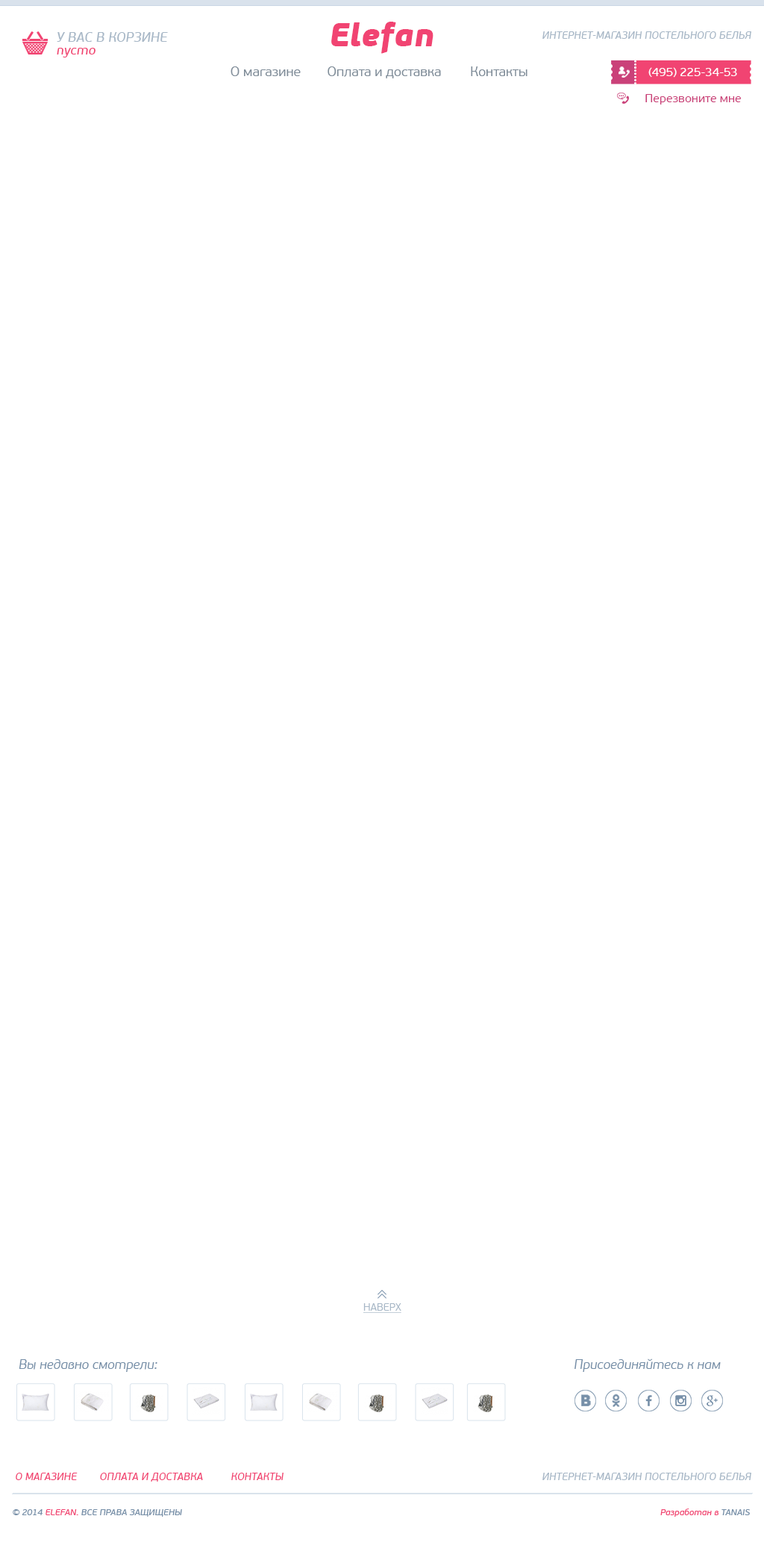
<style>
.page{position:relative;width:764px;height:1560px;background:#ffffff}
.page>*{position:absolute;margin:0}
.t1{font:32.5px "PFBeauSansPro-BlackItalic";color:#f14472}
.t2{font:13.3px "PFBeauSansPro-BbookItalic";color:#a8b8c7;text-transform:uppercase}
.t3{font:10.3px "PFBeauSansPro-BbookItalic";color:#a8b8c7;text-transform:uppercase}
.t4{font:13.3px "PFBeauSansPro-BbookItalic";color:#f14472}
.t5{font:13.3px "PFBeauSansPro-Light";color:#7f8c98}
.t6{font:11.8px "PFBeauSansPro-Regular";color:#ffffff}
.t7{font:11.8px "PFBeauSansPro-Regular";color:#ca4179}
.t8{font:10.3px "PFBeauSansPro-Light";color:#a8b8c7;text-transform:uppercase;text-decoration:underline}
.t9{font:13.3px "PFBeauSansPro-LightItalic";color:#768fa8}
.t10{font:10.3px "PFBeauSansPro-BbookItalic";color:#f14472;text-transform:uppercase}
.t11{font:8.9px "PFBeauSansPro-BbookItalic";color:#768fa8}
.t12{font:8.9px "PFBeauSansPro-BbookItalic";color:#f14472;text-transform:uppercase}
.t13{font:8.9px "PFBeauSansPro-BbookItalic";color:#f14472}
</style>
<div class="page">
<p class="t1" style="left:331px;top:22px;width:103px;height:32px">Elefan</p>
<p class="t2" style="left:57px;top:32px;width:111px;height:10px">У ВАС В КОРЗИНЕ</p>
<p class="t3" style="left:543px;top:31px;width:209px;height:8px">Интернет-магазин постельного белья</p>
<p class="t4" style="left:57px;top:48px;width:39px;height:9px">пусто</p>
<p class="t5" style="left:231px;top:66px;width:70px;height:10px">О магазине</p>
<p class="t5" style="left:328px;top:66px;width:113px;height:12px">Оплата и доставка</p>
<p class="t5" style="left:471px;top:66px;width:57px;height:10px">Контакты</p>
<p class="t6" style="left:649px;top:67px;width:88px;height:11px">(495) 225-34-53</p>
<p class="t7" style="left:646px;top:94px;width:95px;height:11px">Перезвоните мне</p>
<p class="t8" style="left:363px;top:1303px;width:39px;height:10px">наверх</p>
<p class="t9" style="left:19px;top:1359px;width:138px;height:13px">Вы недавно смотрели:</p>
<p class="t9" style="left:575px;top:1359px;width:146px;height:13px">Присоединяйтесь к нам</p>
<p class="t10" style="left:16px;top:1473px;width:62px;height:7px">О магазине</p>
<p class="t10" style="left:100px;top:1473px;width:103px;height:9px">Оплата и доставка</p>
<p class="t10" style="left:231px;top:1473px;width:53px;height:7px">Контакты</p>
<p class="t3" style="left:543px;top:1473px;width:209px;height:7px">Интернет-магазин постельного белья</p>
<p class="t11" style="left:13px;top:1509px;width:169px;height:8px">© 2014 <span class="t12">elefan. </span>ВСЕ ПРАВА ЗАЩИЩЕНЫ</p>
<p class="t13" style="left:661px;top:1509px;width:89px;height:8px">Разработан в <span class="t11">TANAIS</span></p>
</div>
